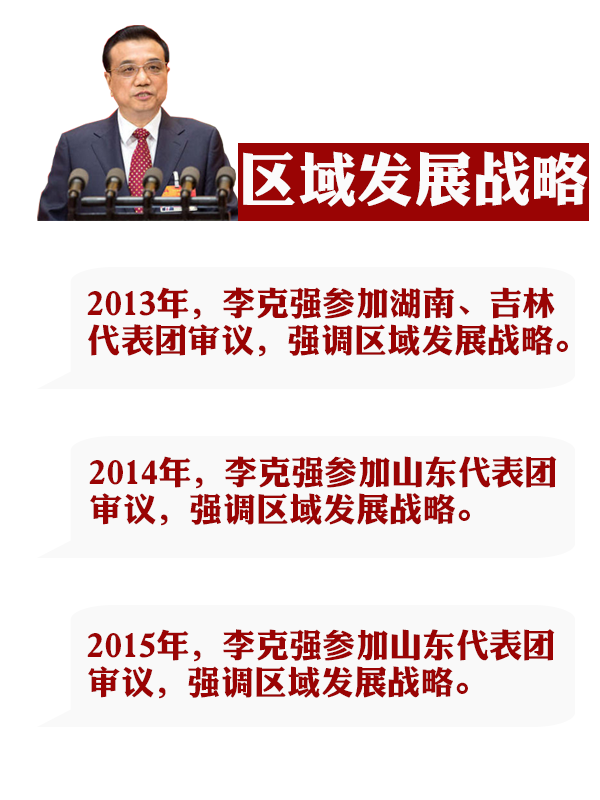
<style>
.page{position:relative;width:600px;height:800px;background:#ffffff}
.page>*{position:absolute;margin:0}
.t1{font:58.3px "DFLiJinHeiW8";color:#fbfbfb}
.t2{font:33.3px/37.5px "DFLiJinHeiW8";color:#9a0404}
</style>
<div class="page">
<p class="t1" style="left:243px;top:151px;width:345px;height:56px">区域发展战略</p>
<p class="t2" style="left:87px;top:287px;width:481px;height:70px">2013年，李克强参加湖南、吉林<br>代表团审议，强调区域发展战略。</p>
<p class="t2" style="left:89px;top:456px;width:468px;height:70px">2014年，李克强参加山东代表团审议，强调区域发展战略。</p>
<p class="t2" style="left:87px;top:629px;width:468px;height:70px">2015年，李克强参加山东代表团审议，强调区域发展战略。</p>
</div>
